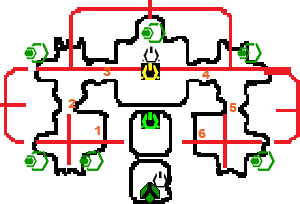
<style>
.page{position:relative;width:300px;height:204px;background:#ffffff}
.page>*{position:absolute;margin:0}
.t1{font:12px "Arial-Black";color:#f26522}
</style>
<div class="page">
<p class="t1" style="left:103px;top:67px;width:8px;height:9px">3</p>
<p class="t1" style="left:202px;top:70px;width:8px;height:9px">4</p>
<p class="t1" style="left:68px;top:99px;width:8px;height:9px">2</p>
<p class="t1" style="left:229px;top:103px;width:8px;height:9px">5</p>
<p class="t1" style="left:95px;top:126px;width:5px;height:9px">1</p>
<p class="t1" style="left:198px;top:129px;width:8px;height:9px">6</p>
</div>
